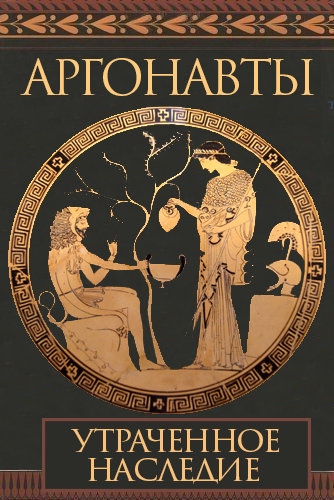
<style>
.page{position:relative;width:334px;height:500px}
.page>*{position:absolute;margin:0}
.t1{font:48px "TrajanPro3-Regular";letter-spacing:-0.08em;color:#feca7d}
.t2{font:36px "TrajanPro3-Regular";letter-spacing:-0.08em;color:#f8c17c}
</style>
<div class="page">
<p class="t1" style="left:20px;top:58px;width:294px;height:38px">АРГОНАВТЫ</p>
<p class="t2" style="left:71px;top:428px;width:209px;height:24px">утраченное</p>
<p class="t2" style="left:88px;top:457px;width:171px;height:27px">наследие</p>
</div>
